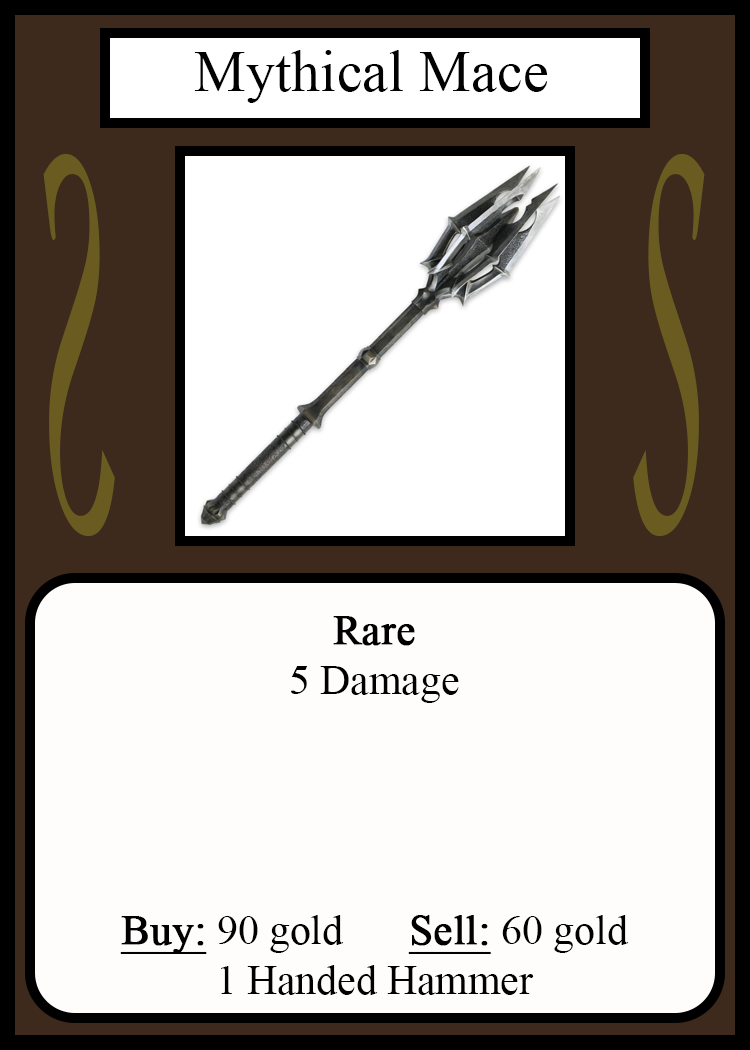
<style>
.page{position:relative;width:750px;height:1050px;background:#fffcfc}
.page>*{position:absolute;margin:0}
.t1{font:58.3px "TimesNewRomanPSMT";color:#010101}
.t2{font:548.5px "Apple-Chancery";color:#6a5c21;scale:0.27 1}
.t3{font:548.2px "Apple-Chancery";color:#6a5c21;scale:0.27 1}
.t4{font:41.7px "TimesNewRomanPSMT";color:#000000}
.t5{font:41.7px "TimesNewRomanPSMT";color:#000000;font-weight:bold}
.t6{font:41.7px "TimesNewRomanPSMT";color:#000000;font-weight:bold;text-decoration:underline}
</style>
<div class="page">
<p class="t1" style="left:194px;top:50px;width:354px;height:53px">Mythical Mace</p>
<p class="t2" style="left:43px;top:154px;width:72px;height:382px;rotate:180deg">S</p>
<p class="t3" style="left:633px;top:154px;width:72px;height:382px">S</p>
<p class="t4" style="left:120px;top:616px;width:509px;height:379px;text-align:center"><span class="t5">Rare<br></span>5 Damage<br><br><br><br><br><span class="t6">Buy:</span> 90 gold   <span class="t6">Sell:</span> 60 gold<br>1 Handed Hammer</p>
</div>
